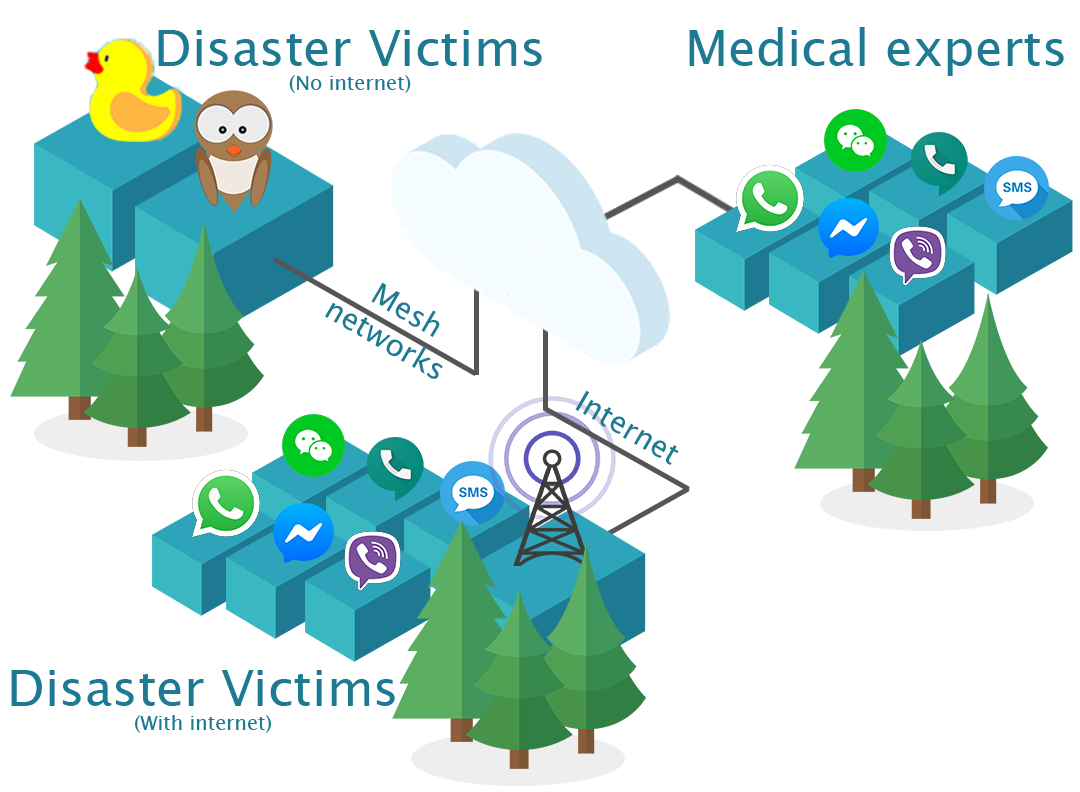
<style>
.page{position:relative;width:1080px;height:792px;background:#ffffff}
.page>*{position:absolute;margin:0}
.t1{font:50px "LucidaSansUnicode";color:#1e7a92}
.t2{font:20px "LucidaSansUnicode";color:#1e7a92}
.t3{font:30px "LucidaSansUnicode";color:#1e7a92}
</style>
<div class="page">
<p class="t1" style="left:158px;top:30px;width:384px;height:63px;text-align:center">Disaster Victims<br><span class="t2">(No internet)</span></p>
<p class="t1" style="left:689px;top:27px;width:375px;height:49px">Medical experts</p>
<p class="t3" style="left:325px;top:282px;width:118px;height:97px;text-align:center;rotate:30deg">Mesh <br>networks</p>
<p class="t3" style="left:575px;top:390px;width:104px;height:75px;rotate:30deg">Internet</p>
<p class="t1" style="left:11px;top:670px;width:384px;height:63px;text-align:center">Disaster Victims<br><span class="t2">(With internet)</span></p>
</div>
